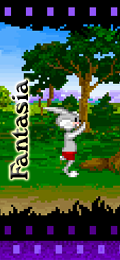
<style>
.page{position:relative;width:120px;height:260px}
.page>*{position:absolute;margin:0}
.t1{font:24px "WindsorBT-Roman";color:#000000}
</style>
<div class="page">
<p class="t1" style="left:10px;top:79px;width:19px;height:101px;rotate:-90deg">Fantasia</p>
</div>
